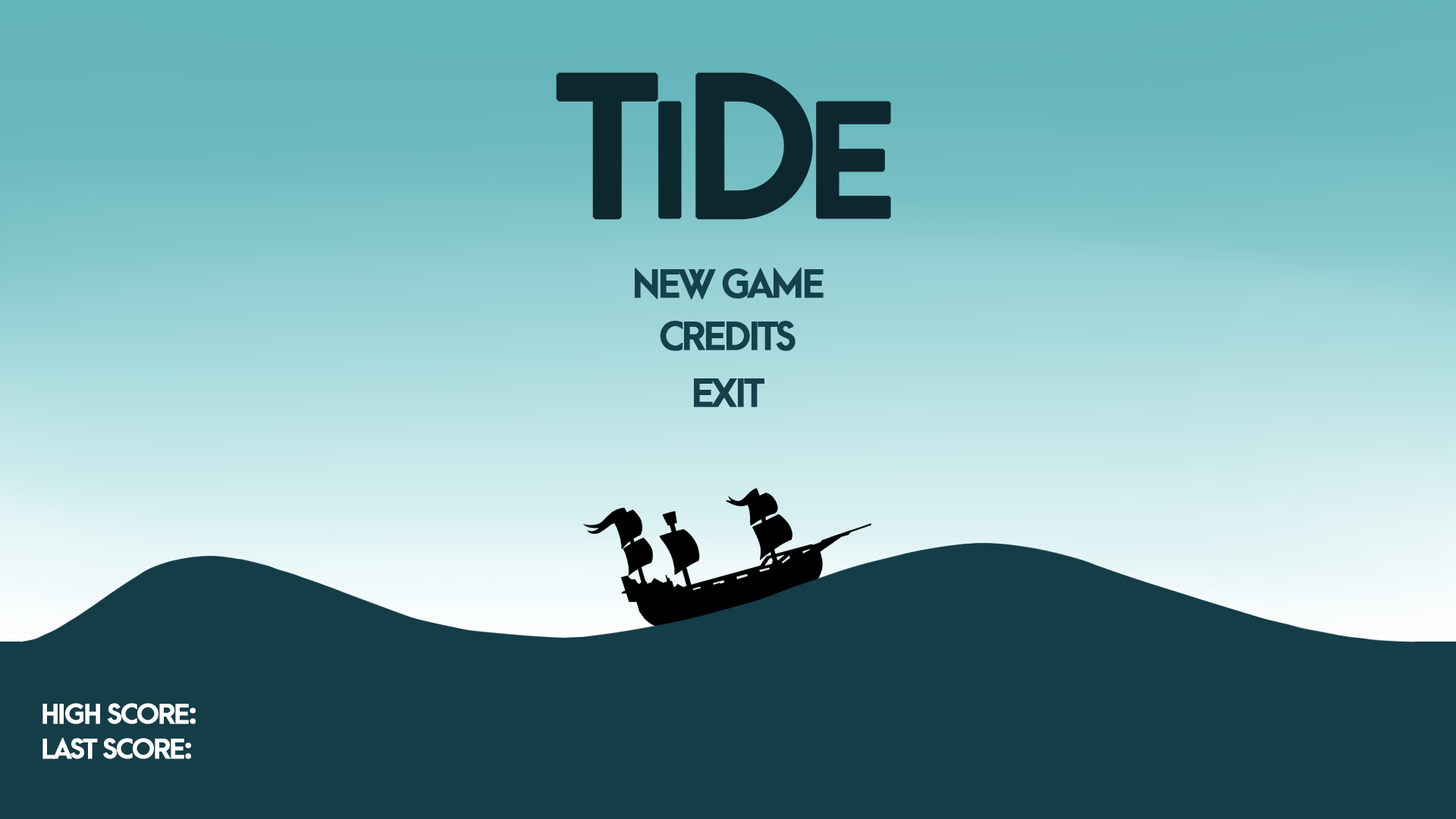
<style>
.page{position:relative;width:1456px;height:819px;background:#143d48}
.page>*{position:absolute;margin:0}
.t1{font:184.3px "ArcaMajora2-Heavy";letter-spacing:-0.08em;color:#0d272e;font-weight:bold}
.t2{font:147.5px "ArcaMajora2-Heavy";letter-spacing:-0.08em;color:#0d272e;font-weight:bold}
.t3{font:147.5px "ArcaMajora2-Heavy";letter-spacing:0.1em;color:#0d272e;font-weight:bold}
.t4{font:36.9px "ArcaMajora2-Heavy";letter-spacing:-0.08em;color:#15414d;font-weight:bold}
.t5{font:25.8px "ArcaMajora2-Heavy";letter-spacing:-0.06em;color:#ffffff;font-weight:bold}
</style>
<div class="page">
<p class="t1" style="left:556px;top:72px;width:335px;height:148px">T<span class="t2">I</span>D<span class="t3">E</span></p>
<p class="t4" style="left:635px;top:268px;width:189px;height:32px">new game</p>
<p class="t4" style="left:660px;top:321px;width:135px;height:30px">credits</p>
<p class="t4" style="left:694px;top:378px;width:70px;height:29px">exit</p>
<p class="t5" style="left:42px;top:703px;width:154px;height:21px">High score:</p>
<p class="t5" style="left:42px;top:738px;width:149px;height:21px">Last score:</p>
</div>
